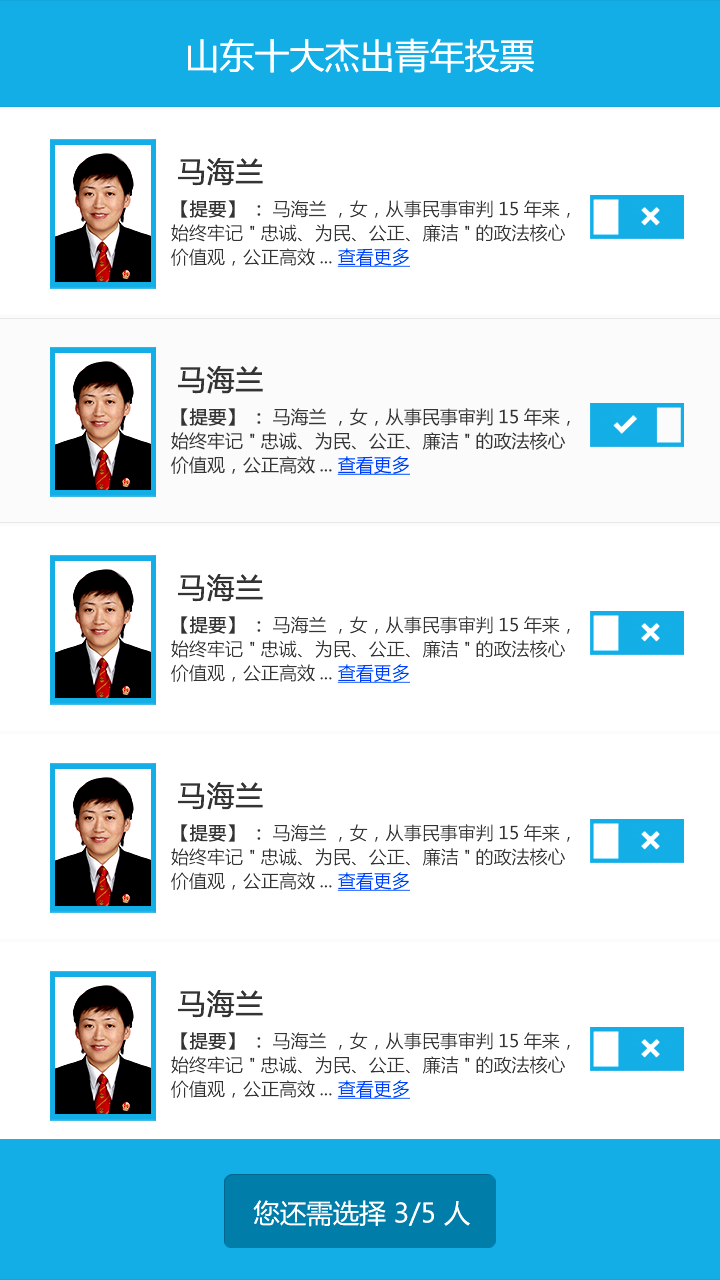
<style>
.page{position:relative;width:720px;height:1280px;background:#ffffff}
.page>*{position:absolute;margin:0}
.t1{font:35px "MicrosoftYaHei";color:#ffffff}
.t2{font:28px "MicrosoftYaHei";color:#343434;font-weight:bold}
.t3{font:18px/24px "MicrosoftYaHei";color:#343434}
.t4{font:18px/24px "MicrosoftYaHei";color:#343434;font-weight:bold}
.t5{font:18px/24px "MicrosoftYaHei";color:#343434;text-decoration:underline}
.t6{font:26.5px "MicrosoftYaHei";color:#fffefe}
</style>
<div class="page">
<p class="t1" style="left:188px;top:38px;width:346px;height:35px">山东十大杰出青年投票</p>
<p class="t2" style="left:178px;top:158px;width:85px;height:28px">马海兰</p>
<p class="t3" style="left:171px;top:200px;width:399px;height:67px"><span class="t4">【提要】：</span>马海兰 ，女，从事民事审判15年来，始终牢记 "忠诚、为民、公正、廉洁"的政法核心价值观，公正高效... <span class="t5">查看更多</span></p>
<p class="t2" style="left:178px;top:366px;width:85px;height:28px">马海兰</p>
<p class="t3" style="left:171px;top:408px;width:399px;height:67px"><span class="t4">【提要】：</span>马海兰 ，女，从事民事审判15年来，始终牢记 "忠诚、为民、公正、廉洁"的政法核心价值观，公正高效... <span class="t5">查看更多</span></p>
<p class="t2" style="left:178px;top:574px;width:85px;height:28px">马海兰</p>
<p class="t3" style="left:171px;top:616px;width:399px;height:67px"><span class="t4">【提要】：</span>马海兰 ，女，从事民事审判15年来，始终牢记 "忠诚、为民、公正、廉洁"的政法核心价值观，公正高效... <span class="t5">查看更多</span></p>
<p class="t2" style="left:178px;top:782px;width:85px;height:28px">马海兰</p>
<p class="t3" style="left:171px;top:824px;width:399px;height:67px"><span class="t4">【提要】：</span>马海兰 ，女，从事民事审判15年来，始终牢记 "忠诚、为民、公正、廉洁"的政法核心价值观，公正高效... <span class="t5">查看更多</span></p>
<p class="t2" style="left:178px;top:990px;width:85px;height:28px">马海兰</p>
<p class="t3" style="left:171px;top:1032px;width:399px;height:67px"><span class="t4">【提要】：</span>马海兰 ，女，从事民事审判15年来，始终牢记 "忠诚、为民、公正、廉洁"的政法核心价值观，公正高效... <span class="t5">查看更多</span></p>
<p class="t6" style="left:253px;top:1200px;width:217px;height:27px">您还需选择 3/5 人</p>
</div>
